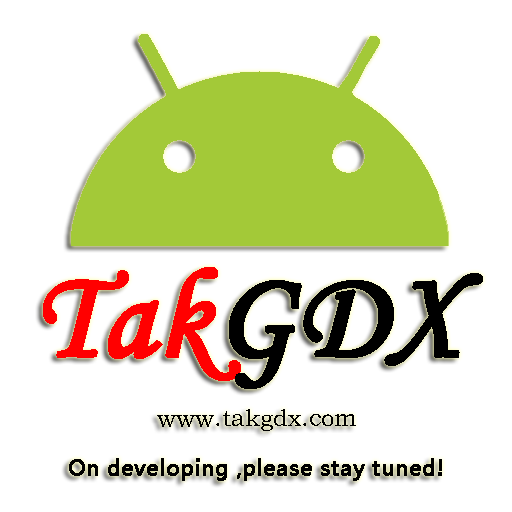
<style>
.page{position:relative;width:512px;height:512px;background:#ffffff}
.page>*{position:absolute;margin:0}
.t1{font:125.3px "STLiti";color:#ff0000;font-weight:bold}
.t2{font:125.3px "STLiti";color:#000000;font-weight:bold}
.t3{font:24px "STZhongsong";color:#000000}
.t4{font:21.3px "MicrosoftYaHei";color:#000000;font-weight:bold}
</style>
<div class="page">
<p class="t1" style="left:43px;top:267px;width:440px;height:122px">Tak<span class="t2">GDX</span></p>
<p class="t3" style="left:157px;top:409px;width:199px;height:22px">www.takgdx.com</p>
<p class="t4" style="left:69px;top:458px;width:373px;height:23px">On developing ,please stay tuned!</p>
</div>
